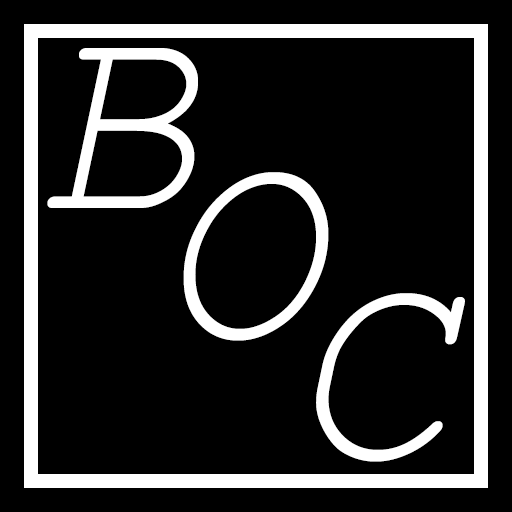
<style>
.page{position:relative;width:512px;height:512px;background:#000000}
.page>*{position:absolute;margin:0}
.t1{font:280px "CourierNewPS-ItalicMT";letter-spacing:-0.02em;color:#ffffff}
</style>
<div class="page">
<p class="t1" style="left:47px;top:48px;width:151px;height:160px">B</p>
<p class="t1" style="left:183px;top:172px;width:146px;height:169px">O</p>
<p class="t1" style="left:316px;top:293px;width:149px;height:169px">C</p>
</div>
